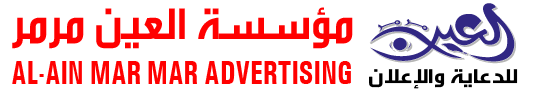
<style>
.page{position:relative;width:535px;height:95px;background:#ffffff}
.page>*{position:absolute;margin:0}
.t1{font:47.1px "GESSTVBold-Bold";color:#ff0000}
.t2{font:34px "Univers-Condensed-Bold";color:#ff0000;scale:0.83 1}
.t3{font:21.2px "GESSTVBold-Bold";color:#000000;scale:1.23 1}
</style>
<div class="page">
<p class="t1" style="left:12px;top:7px;width:341px;height:42px">مؤسسة العين مرمر</p>
<p class="t2" style="left:12px;top:61px;width:339px;height:23px">AL-AIN MAR MAR ADVERTISING</p>
<p class="t3" style="left:369px;top:69px;width:149px;height:20px">للدعاية والإعلان</p>
</div>
